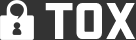
<style>
.page{position:relative;width:136px;height:40px;background:#333333}
.page>*{position:absolute;margin:0}
.t1{font:54px "StratumNo1-Black";color:#ffffff}
</style>
<div class="page">
<p class="t1" style="left:45px;top:3px;width:90px;height:36px">TOX</p>
</div>
